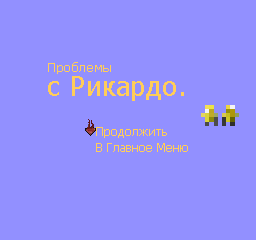
<style>
.page{position:relative;width:256px;height:240px;background:#9290ff}
.page>*{position:absolute;margin:0}
.t1{font:12.5px "Tahoma";color:#ffcd59;scale:1.04 1}
.t2{font:26.5px "Tahoma";color:#ffcd59;scale:1.04 1}
.t3{font:12px "Tahoma";color:#ffcd59}
</style>
<div class="page">
<p class="t1" style="left:48px;top:62px;width:63px;height:12px">Проблемы</p>
<p class="t2" style="left:48px;top:76px;width:136px;height:25px">с Рикардо.</p>
<p class="t3" style="left:96px;top:127px;width:71px;height:11px">Продолжить</p>
<p class="t3" style="left:96px;top:143px;width:92px;height:9px">В Главное Меню</p>
</div>
